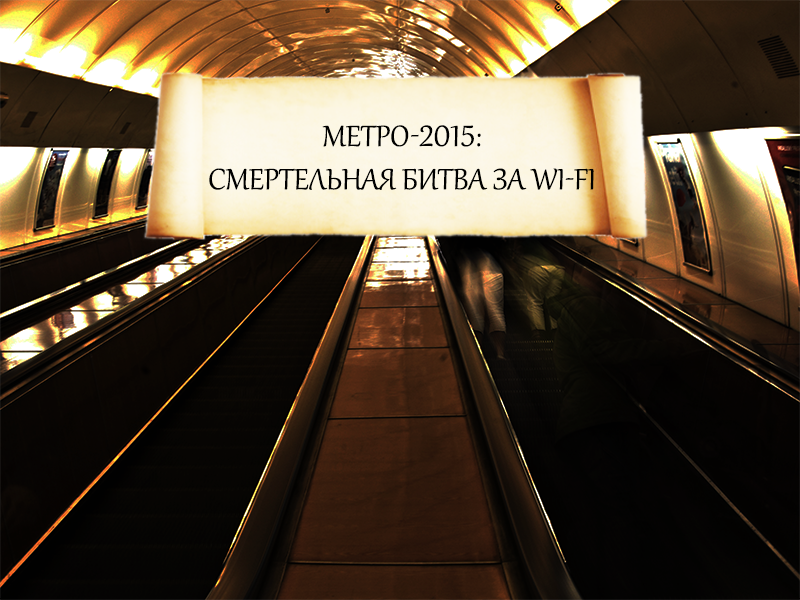
<style>
.page{position:relative;width:800px;height:600px}
.page>*{position:absolute;margin:0}
.t1{font:36px "Gabriola";color:#000000;text-transform:uppercase}
</style>
<div class="page">
<p class="t1" style="left:209px;top:125px;width:385px;height:65px;text-align:center">метро-2015:<br>смертельная битва за Wi-fi</p>
</div>
